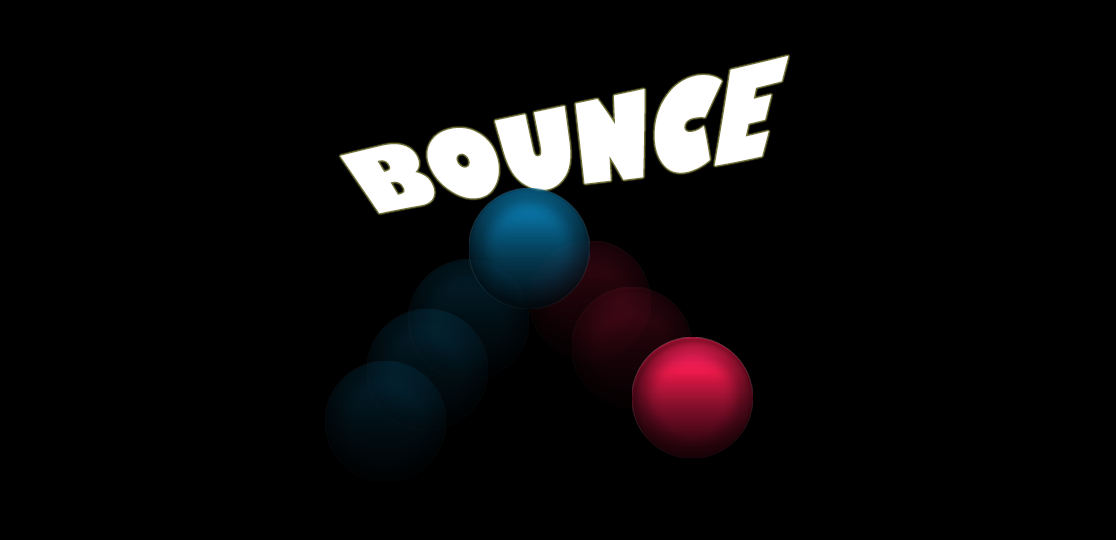
<style>
.page{position:relative;width:1116px;height:540px;background:#000000}
.page>*{position:absolute;margin:0}
.t1{font:105.7px "GillSans-UltraBold";color:#ffffff;text-transform:uppercase;scale:0.79 1}
</style>
<div class="page">
<p class="t1" style="left:340px;top:55px;width:449px;height:159px;rotate:-10deg">Bounce</p>
</div>
